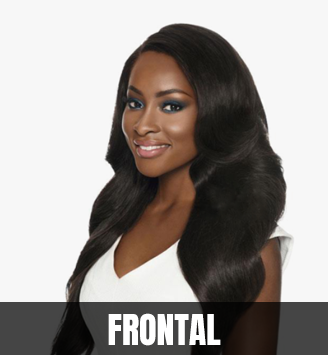
<style>
.page{position:relative;width:328px;height:355px;background:#f7f7f7}
.page>*{position:absolute;margin:0}
.t1{font:36px "Anton-Regular";color:#ffffff}
</style>
<div class="page">
<p class="t1" style="left:108px;top:313px;width:113px;height:33px">FRONTAL</p>
</div>
